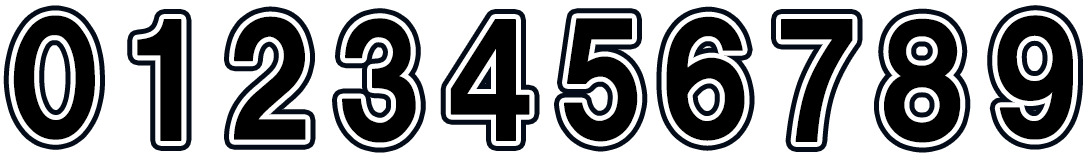
<style>
.page{position:relative;width:1089px;height:165px;background:#ffffff}
.page>*{position:absolute;margin:0}
.t1{font:150px "HGSSoeiKakugothicUB";letter-spacing:-0.025em;color:#000000;font-weight:bold}
</style>
<div class="page">
<p class="t1" style="left:13px;top:15px;width:82px;height:125px">0</p>
<p class="t1" style="left:234px;top:16px;width:72px;height:124px">2</p>
<p class="t1" style="left:666px;top:16px;width:79px;height:125px">6</p>
<p class="t1" style="left:997px;top:15px;width:76px;height:125px">9</p>
<p class="t1" style="left:137px;top:19px;width:45px;height:122px">1</p>
<p class="t1" style="left:342px;top:18px;width:74px;height:125px">3</p>
<p class="t1" style="left:450px;top:19px;width:80px;height:122px">4</p>
<p class="t1" style="left:564px;top:18px;width:74px;height:124px">5</p>
<p class="t1" style="left:781px;top:19px;width:72px;height:123px">7</p>
<p class="t1" style="left:884px;top:18px;width:77px;height:125px">8</p>
</div>
